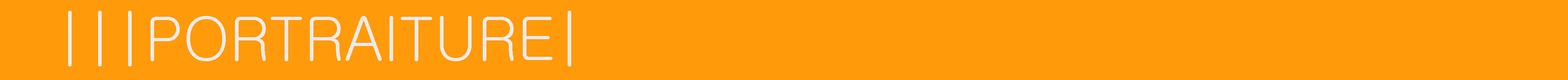
<style>
.page{position:relative;width:1568px;height:80px;background:#ff9a0a}
.page>*{position:absolute;margin:0}
.t1{font:60px "Gulim";color:#ebebeb}
</style>
<div class="page">
<p class="t1" style="left:68px;top:11px;width:503px;height:55px">|||PORTRAITURE|</p>
</div>
